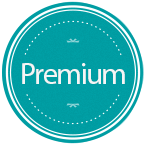
<style>
.page{position:relative;width:146px;height:145px;background:#ffffff}
.page>*{position:absolute;margin:0}
.t1{font:30px "MyriadPro-Regular";letter-spacing:-0.04em;color:#f5f5f5}
</style>
<div class="page">
<p class="t1" style="left:22px;top:63px;width:103px;height:21px">Premium</p>
</div>
